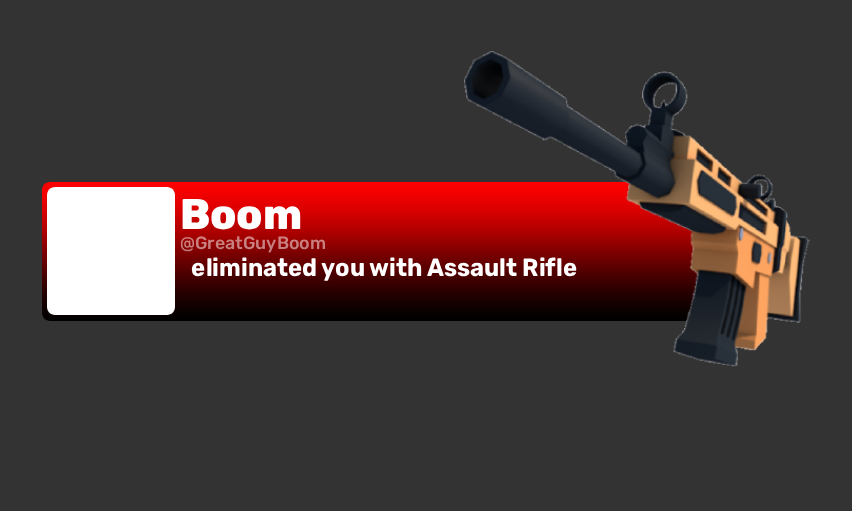
<style>
.page{position:relative;width:852px;height:511px;background:#333333}
.page>*{position:absolute;margin:0}
.t1{font:43px "Rubik-ExtraBold";color:#ffffff}
.t2{font:17.8px "Rubik-Medium";color:#c88080}
.t3{font:25px "Rubik-Bold";color:#ffffff;scale:0.95 1}
</style>
<div class="page">
<p class="t1" style="left:182px;top:198px;width:119px;height:32px">Boom</p>
<p class="t2" style="left:180px;top:236px;width:146px;height:17px">@GreatGuyBoom</p>
<p class="t3" style="left:191px;top:257px;width:386px;height:24px">eliminated you with Assault Rifle</p>
</div>
